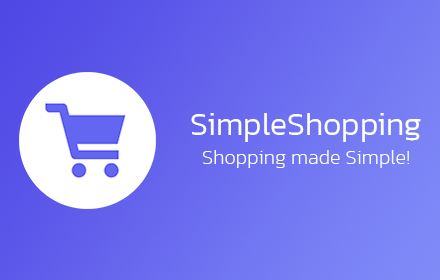
<style>
.page{position:relative;width:440px;height:280px}
.page>*{position:absolute;margin:0}
.t1{font:32.1px "Kanit-Light";color:#ffffff}
.t2{font:20.3px "Kanit-ExtraLight";color:#ffffff}
</style>
<div class="page">
<p class="t1" style="left:191px;top:113px;width:230px;height:29px">SimpleShopping</p>
<p class="t2" style="left:203px;top:150px;width:206px;height:18px">Shopping made Simple!</p>
</div>
